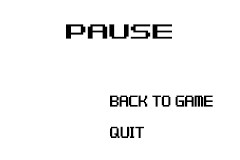
<style>
.page{position:relative;width:240px;height:160px;background:#ffffff}
.page>*{position:absolute;margin:0}
.t1{font:16.5px "F-Zero-GP-Legend-Font";letter-spacing:-0.025em;color:#000000;scale:1.19 1}
.t2{font:13px "F-Zero-GP-Legend-Font";letter-spacing:-0.025em;color:#000000;scale:0.67 1}
</style>
<div class="page">
<p class="t1" style="left:66px;top:24px;width:106px;height:15px">Pause</p>
<p class="t2" style="left:110px;top:95px;width:103px;height:43px">Back to Game<br><br>quit</p>
</div>
